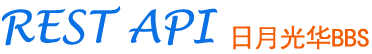
<style>
.page{position:relative;width:372px;height:54px;background:#ffffff}
.page>*{position:absolute;margin:0}
.t1{font:44px "LucidaHandwriting-Italic";letter-spacing:-0.01em;color:#0a71e5}
.t2{font:26px "SimHei";letter-spacing:-0.01em;color:#f35d03}
</style>
<div class="page">
<p class="t1" style="left:2px;top:6px;width:216px;height:40px">REST API</p>
<p class="t2" style="left:233px;top:25px;width:136px;height:25px">日月光华BBS</p>
</div>
